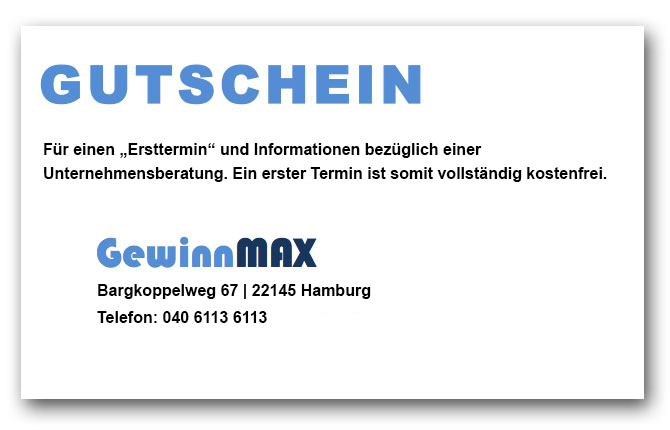
<style>
.page{position:relative;width:670px;height:430px;background:#ffffff}
.page>*{position:absolute;margin:0}
.t1{font:16px/24px "Arial-BoldMT";color:#000000}
.t2{font:16px "Arial-BoldMT";color:#000000}
</style>
<div class="page">
<p class="t1" style="left:44px;top:143px;width:563px;height:39px">Für einen „Ersttermin“ und Informationen bezüglich einer <br>Unternehmensberatung. Ein erster Termin ist somit vollständig kostenfrei.</p>
<p class="t2" style="left:98px;top:284px;width:273px;height:15px">Bargkoppelweg 67 | 22145 Hamburg</p>
<p class="t2" style="left:97px;top:311px;width:170px;height:12px">Telefon: 040 6113 6113</p>
</div>
